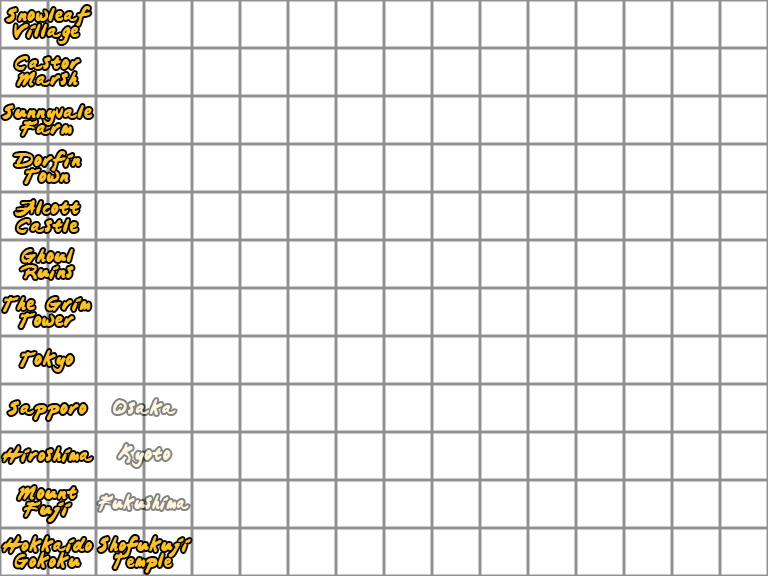
<style>
.page{position:relative;width:768px;height:576px;background:#ffffff}
.page>*{position:absolute;margin:0}
.t1{font:16px/16px "JapaneseBrush";letter-spacing:-0.02em;color:#ffc028;scale:0.9 1}
.t2{font:16px/18px "JapaneseBrush";letter-spacing:-0.02em;color:#ffc028;scale:0.9 1}
.t3{font:16px "JapaneseBrush";letter-spacing:-0.02em;color:#ffc028;scale:0.9 1}
.t4{font:16px "JapaneseBrush";letter-spacing:-0.02em;color:#fff6df;scale:0.9 1}
.t5{font:16px "JapaneseBrush";letter-spacing:-0.02em;color:#ffc028;scale:0.85 1}
.t6{font:16px "JapaneseBrush";letter-spacing:-0.03em;color:#fff6df;scale:0.8 1}
.t7{font:16px/16px "JapaneseBrush";letter-spacing:-0.02em;color:#ffc028;scale:0.85 1}
</style>
<div class="page">
<p class="t1" style="left:5px;top:6px;width:86px;height:38px;text-align:center">Snowleaf<br>Village</p>
<p class="t1" style="left:15px;top:56px;width:65px;height:30px;text-align:center">Castor<br>Marsh</p>
<p class="t1" style="left:2px;top:105px;width:91px;height:31px;text-align:center">Sunnyvale<br>Farm</p>
<p class="t1" style="left:14px;top:151px;width:67px;height:33px;text-align:center">Dorfin<br>Town</p>
<p class="t2" style="left:15px;top:200px;width:65px;height:33px;text-align:center">Alcott<br>Castle</p>
<p class="t1" style="left:20px;top:249px;width:54px;height:30px;text-align:center">Ghoul<br>Ruins</p>
<p class="t1" style="left:3px;top:297px;width:88px;height:31px;text-align:center">The Grim<br>Tower</p>
<p class="t3" style="left:20px;top:350px;width:54px;height:22px">Tokyo</p>
<p class="t3" style="left:8px;top:401px;width:79px;height:19px">Sapporo</p>
<p class="t4" style="left:113px;top:399px;width:63px;height:16px">Osaka</p>
<p class="t5" style="left:2px;top:446px;width:91px;height:17px">Hiroshima</p>
<p class="t4" style="left:118px;top:444px;width:53px;height:23px">Kyoto</p>
<p class="t1" style="left:17px;top:486px;width:60px;height:36px;text-align:center">Mount<br>Fuji</p>
<p class="t6" style="left:98px;top:494px;width:91px;height:17px">Fukushima</p>
<p class="t7" style="left:2px;top:536px;width:90px;height:32px;text-align:center">Hokkaido<br>Gokoku</p>
<p class="t7" style="left:98px;top:536px;width:93px;height:37px;text-align:center">Shofukuji<br>Temple</p>
</div>
